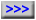
<style>
.page{position:relative;width:36px;height:20px}
.page>*{position:absolute;margin:0}
.t1{font:15px "ArialMT";color:#0000ff;scale:0.9 1}
</style>
<div class="page">
<p class="t1" style="left:6px;top:5px;width:23px;height:8px">&gt;&gt;&gt;</p>
</div>
